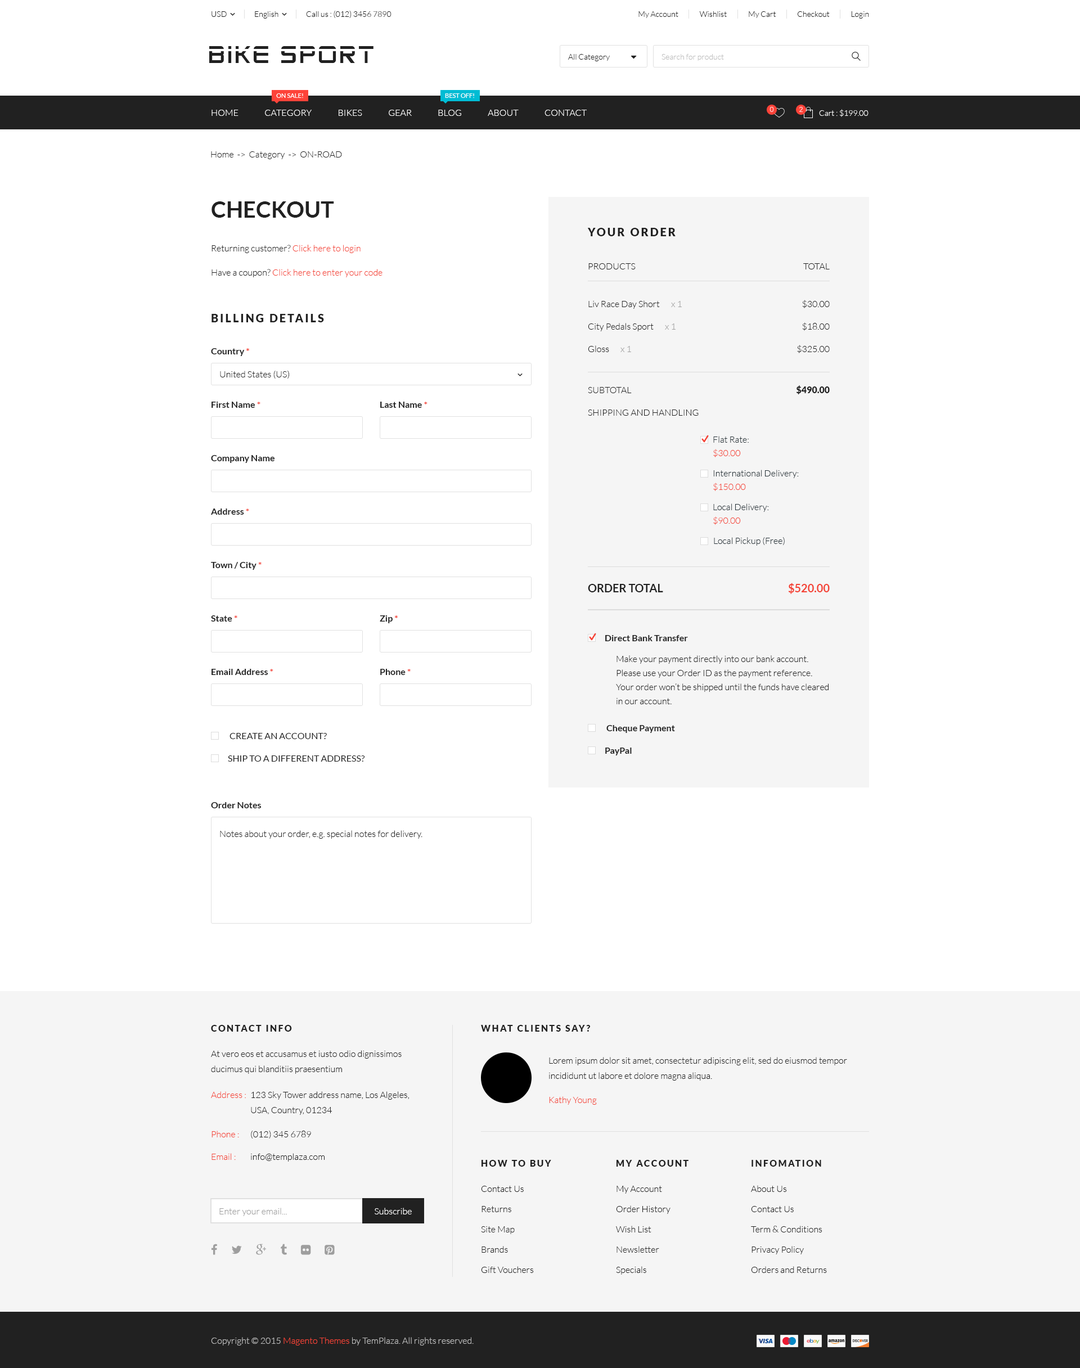
<style>
.page{position:relative;width:1080px;height:1368px;background:#ffffff}
.page>*{position:absolute;margin:0}
.t1{font:7.9px "Lato-Light";color:#212121}
.t2{font:24.2px "AdventureSubtitlesNormal";letter-spacing:0.1em;color:#212121;text-transform:uppercase}
.t3{font:24.2px "AdventureSubtitlesNormal";letter-spacing:0.1em;color:#212121}
.t4{font:7.9px "Lato-Light";color:#bdbdbd}
.t5{font:6.2px "Lato-Regular";color:#ffffff;text-transform:uppercase}
.t6{font:9px "Lato-Light";color:#ffffff;text-transform:uppercase}
.t7{font:6.7px "Lato-Light"}
.t8{font:7.9px "Lato-Light";color:#ffffff}
.t9{font:9px "Lato-Light";color:#212121}
.t10{font:22.5px "Lato-Bold";color:#212121;text-transform:uppercase}
.t11{font:11.2px "Lato-Black";letter-spacing:0.15em;color:#212121;text-transform:uppercase}
.t12{font:9px "Lato-Light";color:#f44336}
.t13{font:9px "Lato-Light";color:#212121;text-transform:uppercase}
.t14{font:9px "Lato-Light";color:#9e9e9e}
.t15{font:9px "Lato-Bold";color:#212121}
.t16{font:9px "Lato-Bold";color:#f44336}
.t17{font:9px "Lato-Black";color:#212121;text-transform:uppercase}
.t18{font:9px "Lato-Light";color:#263238}
.t19{font:11.2px "Lato-Bold";color:#212121;text-transform:uppercase}
.t20{font:11.2px "Lato-Bold";color:#f44336;text-transform:uppercase}
.t21{font:9px/14.1px "Lato-Light";color:#212121}
.t22{font:9px "Lato-Regular";color:#212121;text-transform:uppercase}
.t23{font:9px "Lato-Black";letter-spacing:0.15em;color:#212121}
.t24{font:9px "Lato-Black";letter-spacing:0.15em;color:#212121;text-transform:uppercase}
.t25{font:9px/15.2px "Lato-Light";color:#212121}
.t26{font:9px/20.2px "Lato-Light";color:#212121}
.t27{font:9px "Lato-Light";color:#ffffff}
.t28{font:9px "Lato-Light";color:#bdbdbd}
</style>
<div class="page">
<p class="t1" style="left:212px;top:11px;width:15px;height:6px">USD</p>
<p class="t1" style="left:255px;top:11px;width:23px;height:8px">English</p>
<p class="t1" style="left:306px;top:11px;width:86px;height:7px">Call us : (012) 3456 7890</p>
<p class="t1" style="left:638px;top:11px;width:231px;height:8px">My Account              Wishlist              My Cart              Checkout              Login</p>
<p class="t2" style="left:209px;top:46px;width:165px;height:17px">b<span class="t3">l</span>ke sport</p>
<p class="t1" style="left:568px;top:54px;width:42px;height:7px">All Category</p>
<p class="t4" style="left:662px;top:54px;width:62px;height:7px">Search for product</p>
<p class="t5" style="left:276px;top:93px;width:27px;height:5px">On sale!</p>
<p class="t5" style="left:445px;top:93px;width:29px;height:5px">Best off!</p>
<p class="t6" style="left:212px;top:110px;width:375px;height:6px">Home               category               Bikes               Gear               Blog               About               Contact</p>
<p class="t7" style="left:770px;top:107px;width:4px;height:5px">0</p>
<p class="t7" style="left:799px;top:107px;width:4px;height:5px">2</p>
<p class="t8" style="left:819px;top:109px;width:49px;height:8px">Cart : $199.00</p>
<p class="t9" style="left:211px;top:151px;width:131px;height:8px">Home  -&gt;  Category  -&gt;  ON-ROAD</p>
<p class="t10" style="left:212px;top:201px;width:122px;height:17px">Checkout</p>
<p class="t11" style="left:588px;top:228px;width:88px;height:8px">Your Order</p>
<p class="t9" style="left:212px;top:245px;width:149px;height:8px">Returning customer? <span class="t12">Click here to login</span></p>
<p class="t12" style="left:212px;top:269px;width:170px;height:8px"><span class="t9">Have a coupon? </span>Click here to enter your code</p>
<p class="t13" style="left:588px;top:263px;width:48px;height:6px">Products</p>
<p class="t13" style="left:803px;top:263px;width:27px;height:6px">Total</p>
<p class="t9" style="left:588px;top:300px;width:72px;height:9px">Liv Race Day Short</p>
<p class="t14" style="left:671px;top:301px;width:11px;height:6px">x 1</p>
<p class="t9" style="left:802px;top:300px;width:28px;height:8px">$30.00</p>
<p class="t11" style="left:212px;top:314px;width:112px;height:8px">Billing Details</p>
<p class="t9" style="left:588px;top:323px;width:66px;height:8px">City Pedals Sport</p>
<p class="t14" style="left:665px;top:323px;width:11px;height:7px">x 1</p>
<p class="t9" style="left:802px;top:322px;width:28px;height:9px">$18.00</p>
<p class="t15" style="left:211px;top:348px;width:38px;height:8px">Country<span class="t16"> *</span></p>
<p class="t9" style="left:588px;top:345px;width:21px;height:7px">Gloss</p>
<p class="t14" style="left:620px;top:346px;width:11px;height:6px">x 1</p>
<p class="t9" style="left:797px;top:345px;width:33px;height:8px">$325.00</p>
<p class="t9" style="left:220px;top:371px;width:70px;height:8px">United States (US)</p>
<p class="t13" style="left:588px;top:387px;width:44px;height:6px">Subtotal</p>
<p class="t17" style="left:796px;top:385px;width:34px;height:9px">$490.00</p>
<p class="t15" style="left:212px;top:402px;width:48px;height:6px">First Name <span class="t16">*</span></p>
<p class="t15" style="left:380px;top:402px;width:48px;height:6px">Last Name <span class="t16">*</span></p>
<p class="t13" style="left:588px;top:410px;width:111px;height:6px">Shipping and handling</p>
<p class="t18" style="left:713px;top:436px;width:36px;height:7px">Flat Rate:</p>
<p class="t12" style="left:713px;top:449px;width:28px;height:8px">$30.00</p>
<p class="t15" style="left:211px;top:455px;width:64px;height:8px">Company Name</p>
<p class="t18" style="left:713px;top:470px;width:86px;height:8px">International Delivery:</p>
<p class="t12" style="left:713px;top:483px;width:33px;height:8px">$150.00</p>
<p class="t15" style="left:211px;top:508px;width:38px;height:7px">Address <span class="t16">*</span></p>
<p class="t18" style="left:713px;top:503px;width:56px;height:9px">Local Delivery:</p>
<p class="t12" style="left:713px;top:516px;width:28px;height:9px">$90.00</p>
<p class="t18" style="left:714px;top:537px;width:71px;height:9px">Local Pickup (Free)</p>
<p class="t15" style="left:211px;top:562px;width:51px;height:8px">Town / City <span class="t16">*</span></p>
<p class="t19" style="left:588px;top:584px;width:75px;height:8px">Order total</p>
<p class="t20" style="left:788px;top:583px;width:42px;height:11px">$520.00</p>
<p class="t15" style="left:211px;top:615px;width:26px;height:7px">State <span class="t16">*</span></p>
<p class="t15" style="left:380px;top:615px;width:18px;height:8px">Zip <span class="t16">*</span></p>
<p class="t15" style="left:605px;top:635px;width:83px;height:6px">Direct Bank Transfer</p>
<p class="t21" style="left:616px;top:655px;width:213px;height:49px">Make your payment directly into our bank account. Please use your Order ID as the payment reference. Your order won’t be shipped until the funds have cleared in our account.</p>
<p class="t15" style="left:212px;top:669px;width:61px;height:6px">Email Address <span class="t16">*</span></p>
<p class="t15" style="left:380px;top:669px;width:31px;height:6px">Phone <span class="t16">*</span></p>
<p class="t15" style="left:606px;top:725px;width:69px;height:8px">Cheque Payment</p>
<p class="t22" style="left:230px;top:733px;width:97px;height:6px">Create an account?</p>
<p class="t15" style="left:605px;top:748px;width:27px;height:7px">PayPal</p>
<p class="t22" style="left:228px;top:755px;width:137px;height:7px">Ship to a different address?</p>
<p class="t15" style="left:211px;top:802px;width:51px;height:6px">Order Notes</p>
<p class="t9" style="left:220px;top:830px;width:202px;height:9px">Notes about your order, e.g. special notes for delivery.</p>
<p class="t23" style="left:211px;top:1025px;width:81px;height:7px">CONTACT INFO</p>
<p class="t24" style="left:481px;top:1025px;width:109px;height:7px">What clients say?</p>
<p class="t25" style="left:211px;top:1050px;width:191px;height:24px">At vero eos et accusamus et iusto odio dignissimos ducimus qui blanditiis praesentium</p>
<p class="t25" style="left:549px;top:1057px;width:298px;height:24px">Lorem ipsum dolor sit amet, consectetur adipiscing elit, sed do eiusmod tempor     incididunt ut labore et dolore magna aliqua.</p>
<p class="t12" style="left:211px;top:1091px;width:35px;height:7px">Address :</p>
<p class="t25" style="left:251px;top:1091px;width:159px;height:24px">123 Sky Tower address name, Los Algeles,        USA, Country, 01234</p>
<p class="t12" style="left:549px;top:1096px;width:48px;height:9px">Kathy Young</p>
<p class="t12" style="left:212px;top:1131px;width:27px;height:6px">Phone :</p>
<p class="t9" style="left:251px;top:1131px;width:60px;height:7px">(012) 345 6789</p>
<p class="t12" style="left:212px;top:1153px;width:24px;height:7px">Email :</p>
<p class="t9" style="left:251px;top:1153px;width:74px;height:9px">info@templaza.com</p>
<p class="t23" style="left:482px;top:1160px;width:69px;height:7px">HOW TO BUY</p>
<p class="t23" style="left:616px;top:1160px;width:72px;height:7px">MY ACCOUNT</p>
<p class="t24" style="left:752px;top:1160px;width:69px;height:7px">Infomation</p>
<p class="t26" style="left:481px;top:1186px;width:53px;height:87px">Contact Us<br>Returns<br>Site Map<br>Brands<br>Gift Vouchers</p>
<p class="t26" style="left:616px;top:1186px;width:54px;height:89px">My Account<br>Order History<br>Wish List<br>Newsletter<br>Specials</p>
<p class="t26" style="left:751px;top:1185px;width:76px;height:88px">About Us<br>Contact Us<br>Term &amp; Conditions<br>Privacy Policy<br>Orders and Returns</p>
<p class="t14" style="left:219px;top:1208px;width:68px;height:8px">Enter your email...</p>
<p class="t27" style="left:375px;top:1208px;width:37px;height:6px">Subscribe</p>
<p class="t28" style="left:211px;top:1337px;width:263px;height:9px">Copyright © 2015 <span class="t12">Magento Themes</span> by TemPlaza. All rights reserved.</p>
</div>
